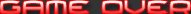
<style>
.page{position:relative;width:191px;height:14px}
.page>*{position:absolute;margin:0}
.t1{font:24px "ThundergodII"}
</style>
<div class="page">
<p class="t1" style="left:0px;top:0px;width:191px;height:14px">GAME OVER</p>
</div>
